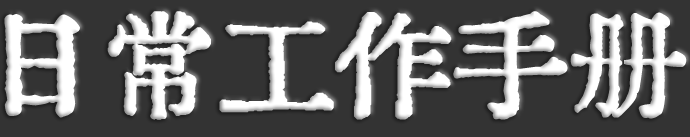
<style>
.page{position:relative;width:690px;height:137px;background:#333333}
.page>*{position:absolute;margin:0}
.t1{font:120px "HWMCT";letter-spacing:-0.05em;color:#ffffff;font-weight:bold}
</style>
<div class="page">
<p class="t1" style="left:4px;top:11px;width:683px;height:109px">日常工作手册</p>
</div>
